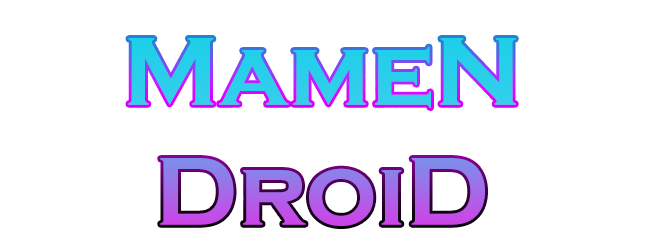
<style>
.page{position:relative;width:650px;height:250px;background:#ffffff}
.page>*{position:absolute;margin:0}
.t1{font:100px "CopperplateGothic-Bold"}
</style>
<div class="page">
<p class="t1" style="left:128px;top:38px;width:388px;height:188px;text-align:center">MameN<br>DroiD</p>
</div>
